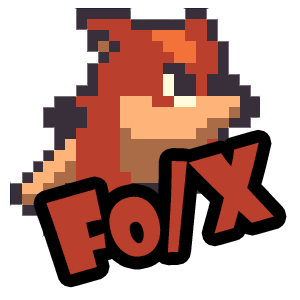
<style>
.page{position:relative;width:300px;height:300px;background:#ffffff}
.page>*{position:absolute;margin:0}
.t1{font:100px "ShowcardGothic-Reg";color:#bb3f2d}
.t2{font:75px "ShowcardGothic-Reg";color:#bb3f2d}
</style>
<div class="page">
<p class="t1" style="left:46px;top:142px;width:228px;height:133px;rotate:-16deg">F<span class="t2">o</span>/X</p>
</div>
